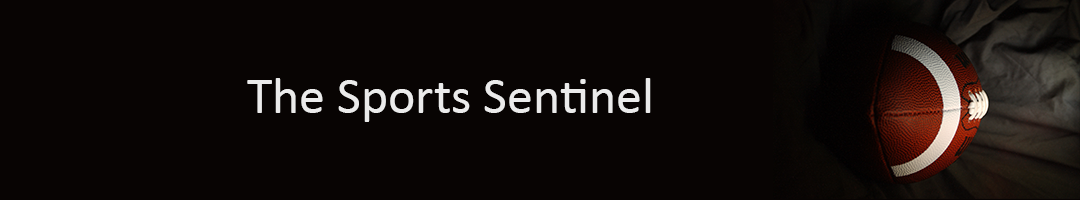
<style>
.page{position:relative;width:1080px;height:200px;background:#080403}
.page>*{position:absolute;margin:0}
.t1{font:52px "Calibri";color:#ebebeb}
</style>
<div class="page">
<p class="t1" style="left:247px;top:78px;width:404px;height:44px">The Sports Sentinel</p>
</div>
